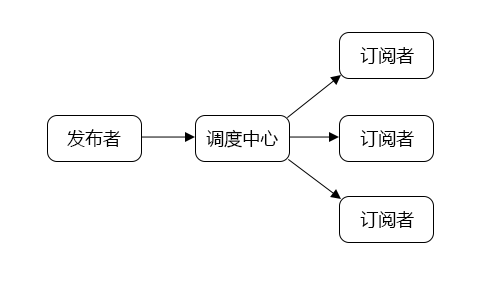
<style>
.page{position:relative;width:500px;height:300px;background:#ffffff}
.page>*{position:absolute;margin:0}
.t1{font:18px "MicrosoftYaHei";color:#000000}
</style>
<div class="page">
<p class="t1" style="left:360px;top:47px;width:54px;height:17px">订阅者</p>
<p class="t1" style="left:67px;top:129px;width:54px;height:18px">发布者</p>
<p class="t1" style="left:206px;top:129px;width:72px;height:19px">调度中心</p>
<p class="t1" style="left:360px;top:130px;width:54px;height:17px">订阅者</p>
<p class="t1" style="left:360px;top:211px;width:54px;height:17px">订阅者</p>
</div>
